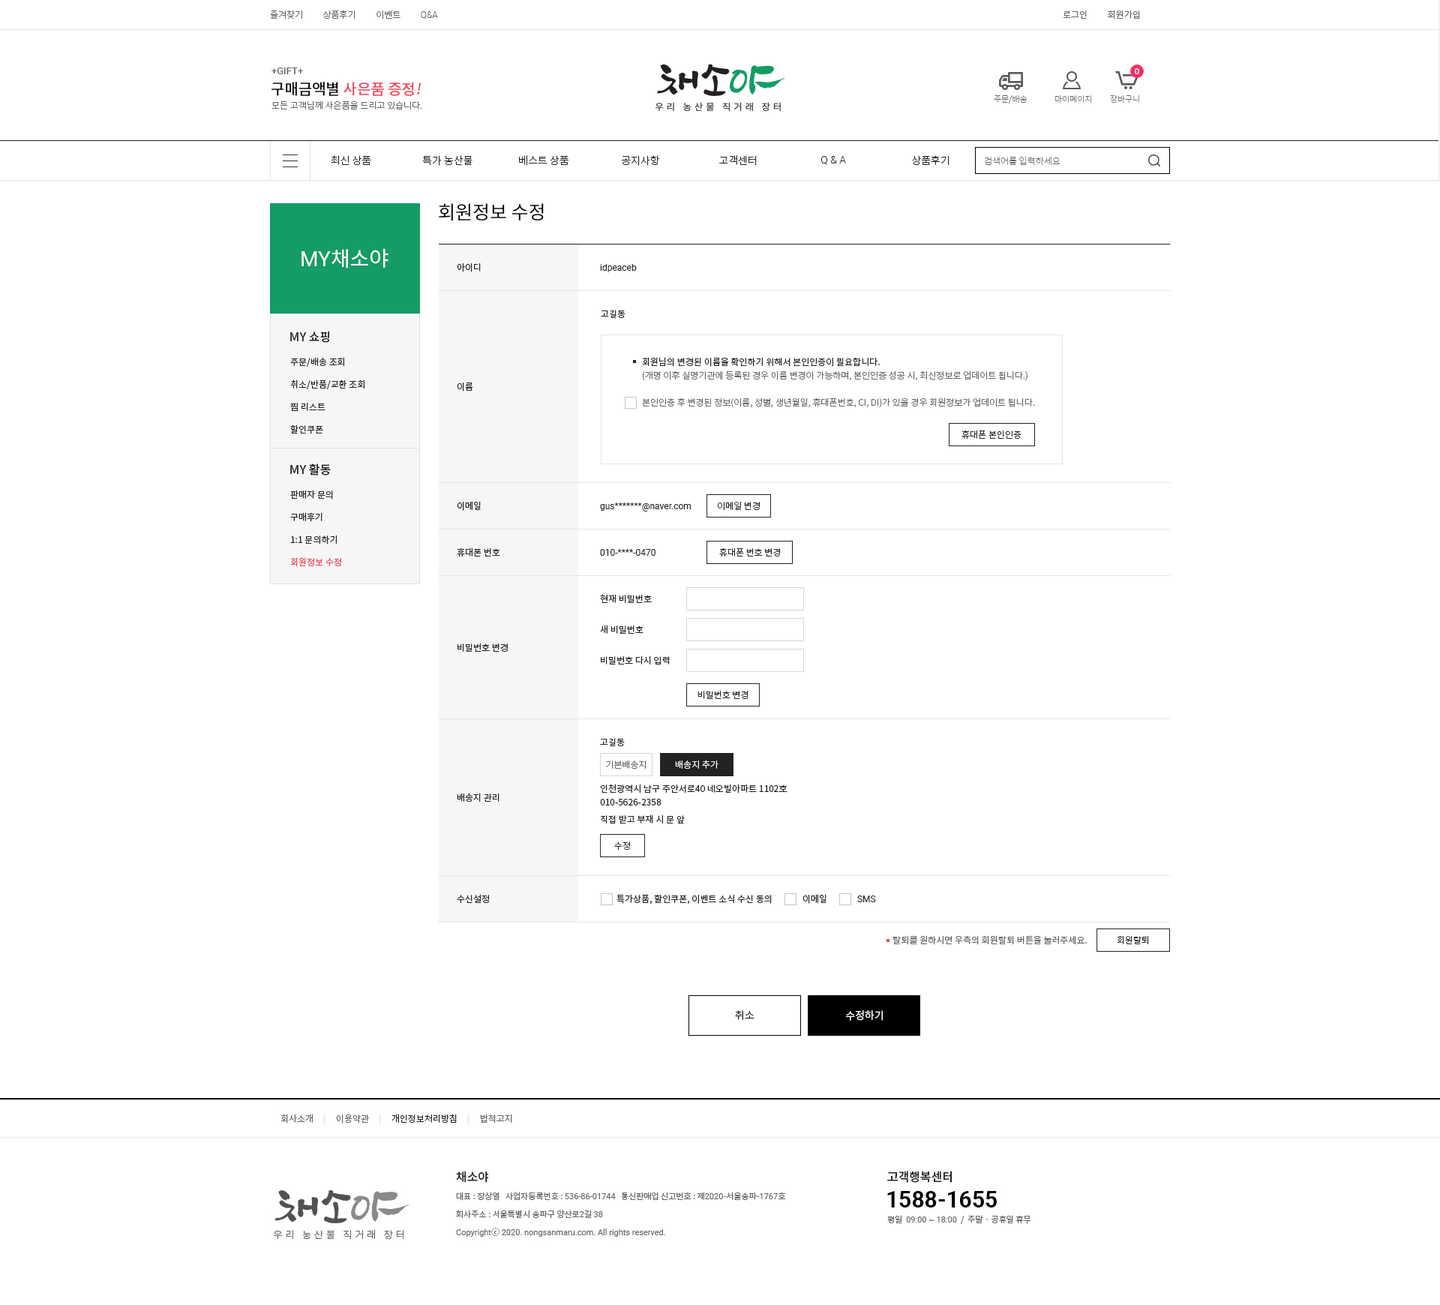
<style>
.page{position:relative;width:1440px;height:1305px;background:#ffffff}
.page>*{position:absolute;margin:0}
.t1{font:9px "NotoSansCJKkr-Light";color:#666666}
.t2{font:9px "Roboto-Light";color:#666666}
.t3{font:9px "NotoSansCJKkr-DemiLight";color:#666666}
.t4{font:9.8px "Roboto-Medium";color:#666666}
.t5{font:15px "NotoSansCJKkr-Medium";color:#ea475c}
.t6{font:15px "NotoSansCJKkr-Medium";color:#000000}
.t7{font:15px "NotoSansCJKkr-Medium";color:#ea475c;font-style:italic}
.t8{font:8.2px "NotoSansCJKkr-Thin";color:#666666}
.t9{font:10.5px "NotoSansCJKkr-Light";color:#222222}
.t10{font:10.5px "Roboto-Light";color:#222222}
.t11{font:9px "NotoSansCJKkr-Thin";color:#666666}
.t12{font:18.8px "NotoSansCJKkr-Regular";color:#000000}
.t13{font:21px "NotoSansCJKkr-Regular";color:#ffffff}
.t14{font:21px "Roboto-Regular";color:#ffffff}
.t15{font:9px "NotoSansCJKkr-Regular";color:#222222}
.t16{font:9px "Roboto-Regular";color:#222222}
.t17{font:12px "NotoSansCJKkr-Medium";color:#222222}
.t18{font:9px/22.5px "NotoSansCJKkr-Regular";color:#222222}
.t19{font:9px/13.5px "NotoSansCJKkr-Light";color:#666666}
.t20{font:9px/13.5px "NotoSansCJKkr-Regular";color:#222222}
.t21{font:9px "NotoSansCJKkr-Light";color:#222222}
.t22{font:9px/22.5px "NotoSansCJKkr-Regular";color:#ea475c}
.t23{font:9px "NotoSansCJKkr-Light";color:#ffffff}
.t24{font:9px "NotoSansCJKkr-Regular";color:#666666}
.t25{font:10.5px "NotoSansCJKkr-DemiLight";color:#222222}
.t26{font:10.5px "NotoSansCJKkr-DemiLight";color:#ffffff}
</style>
<div class="page">
<p class="t1" style="left:270px;top:10px;width:168px;height:10px">즐겨찾기          상품후기          이벤트          <span class="t2">Q&amp;A</span></p>
<p class="t3" style="left:1063px;top:10px;width:77px;height:10px">로그인          회원가입</p>
<p class="t4" style="left:272px;top:68px;width:31px;height:6px">+GIFT+</p>
<p class="t5" style="left:272px;top:82px;width:150px;height:14px"><span class="t6">구매금액별 </span>사은품 증정<span class="t7">!</span></p>
<p class="t1" style="left:272px;top:100px;width:150px;height:10px">모든 고객님께 사은품을 드리고 있습니다.</p>
<p class="t8" style="left:994px;top:94px;width:34px;height:10px">주문/배송</p>
<p class="t8" style="left:1054px;top:95px;width:38px;height:9px">마이페이지</p>
<p class="t8" style="left:1110px;top:94px;width:29px;height:10px">장바구니</p>
<p class="t9" style="left:331px;top:155px;width:40px;height:10px">최신 상품</p>
<p class="t9" style="left:422px;top:155px;width:50px;height:11px">특가 농산물</p>
<p class="t9" style="left:519px;top:155px;width:50px;height:11px">베스트 상품</p>
<p class="t9" style="left:622px;top:155px;width:38px;height:11px">공지사항</p>
<p class="t9" style="left:719px;top:155px;width:38px;height:11px">고객센터</p>
<p class="t10" style="left:821px;top:156px;width:25px;height:9px">Q &amp; A</p>
<p class="t9" style="left:912px;top:155px;width:38px;height:11px">상품후기</p>
<p class="t11" style="left:984px;top:156px;width:76px;height:10px">검색어를 입력하세요</p>
<p class="t12" style="left:439px;top:203px;width:105px;height:18px">회원정보 수정</p>
<p class="t13" style="left:302px;top:248px;width:86px;height:20px"><span class="t14">MY</span>채소야</p>
<p class="t15" style="left:457px;top:263px;width:24px;height:9px">아이디</p>
<p class="t16" style="left:600px;top:264px;width:37px;height:8px">idpeaceb</p>
<p class="t15" style="left:601px;top:310px;width:25px;height:8px">고길동</p>
<p class="t17" style="left:290px;top:331px;width:39px;height:12px">MY 쇼핑</p>
<p class="t18" style="left:290px;top:357px;width:74px;height:77px">주문/배송 조회<br>취소/반품/교환 조회<br>찜 리스트<br>할인쿠폰</p>
<p class="t19" style="left:642px;top:357px;width:393px;height:51px"><span class="t20">회원님의 변경된 이름을 확인하기 위해서 본인인증이 필요합니다.<br></span>(개명 이후 실명기관에 등록된 경우 이름 변경이 가능하며, 본인인증 성공 시, 최신정보로 업데이트 됩니다.)<br><br>본인인증 후 변경된 정보(이름, 성별, 생년월일, 휴대폰번호, CI, DI)가 있을 경우 회원정보가 업데이트 됩니다.</p>
<p class="t15" style="left:457px;top:382px;width:16px;height:10px">이름</p>
<p class="t21" style="left:962px;top:430px;width:60px;height:10px">휴대폰 본인인증</p>
<p class="t17" style="left:290px;top:464px;width:41px;height:12px">MY 활동</p>
<p class="t18" style="left:290px;top:490px;width:51px;height:76px">판매자 문의<br>구매후기<br>1:1 문의하기<br><span class="t22">회원정보 수정</span></p>
<p class="t15" style="left:457px;top:501px;width:24px;height:10px">이메일</p>
<p class="t16" style="left:600px;top:502px;width:92px;height:10px">gus*******@naver.com</p>
<p class="t21" style="left:717px;top:501px;width:43px;height:10px">이메일 변경</p>
<p class="t15" style="left:457px;top:548px;width:43px;height:9px">휴대폰 번호</p>
<p class="t16" style="left:600px;top:549px;width:56px;height:7px">010-****-0470</p>
<p class="t21" style="left:719px;top:548px;width:61px;height:9px">휴대폰 번호 변경</p>
<p class="t15" style="left:600px;top:594px;width:52px;height:9px">현재 비밀번호</p>
<p class="t15" style="left:600px;top:625px;width:44px;height:9px">새 비밀번호</p>
<p class="t15" style="left:458px;top:644px;width:50px;height:8px">비밀번호 변경</p>
<p class="t15" style="left:601px;top:656px;width:69px;height:8px">비밀번호 다시 입력</p>
<p class="t21" style="left:698px;top:691px;width:50px;height:8px">비밀번호 변경</p>
<p class="t15" style="left:600px;top:738px;width:25px;height:8px">고길동</p>
<p class="t1" style="left:606px;top:760px;width:40px;height:9px">기본배송지</p>
<p class="t23" style="left:675px;top:760px;width:43px;height:9px">배송지 추가</p>
<p class="t20" style="left:600px;top:784px;width:188px;height:22px">인천광역시 남구 주안서로40 네오빌아파트 1102호<br>010-5626-2358</p>
<p class="t15" style="left:457px;top:793px;width:43px;height:9px">배송지 관리</p>
<p class="t15" style="left:601px;top:814px;width:84px;height:10px">직접 받고 부재 시 문 앞</p>
<p class="t21" style="left:614px;top:842px;width:16px;height:8px">수정</p>
<p class="t15" style="left:616px;top:894px;width:156px;height:10px">특가상품, 할인쿠폰, 이벤트 소식 수신 동의</p>
<p class="t15" style="left:802px;top:894px;width:24px;height:10px">이메일</p>
<p class="t15" style="left:457px;top:895px;width:32px;height:8px">수신설정</p>
<p class="t16" style="left:857px;top:896px;width:19px;height:6px">SMS</p>
<p class="t24" style="left:893px;top:935px;width:194px;height:10px">탈퇴를 원하시면 우측의 회원탈퇴 버튼을 눌러주세요.</p>
<p class="t21" style="left:1118px;top:935px;width:31px;height:9px">회원탈퇴</p>
<p class="t25" style="left:735px;top:1010px;width:19px;height:10px">취소</p>
<p class="t26" style="left:845px;top:1010px;width:38px;height:11px">수정하기</p>
</div>
